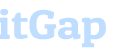
<style>
.page{position:relative;width:120px;height:55px;background:#ffffff}
.page>*{position:absolute;margin:0}
.t1{font:41.8px "PatuaOne-Regular";color:#bfddff;scale:1.12 1}
</style>
<div class="page">
<p class="t1" style="left:0px;top:9px;width:106px;height:39px">itGap</p>
</div>
